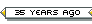
<style>
.page{position:relative;width:92px;height:24px;background:#ffffff}
.page>*{position:absolute;margin:0}
.t1{font:8px "Sevenet7";color:#000000}
</style>
<div class="page">
<p class="t1" style="left:15px;top:10px;width:65px;height:7px">35 years ago</p>
</div>
